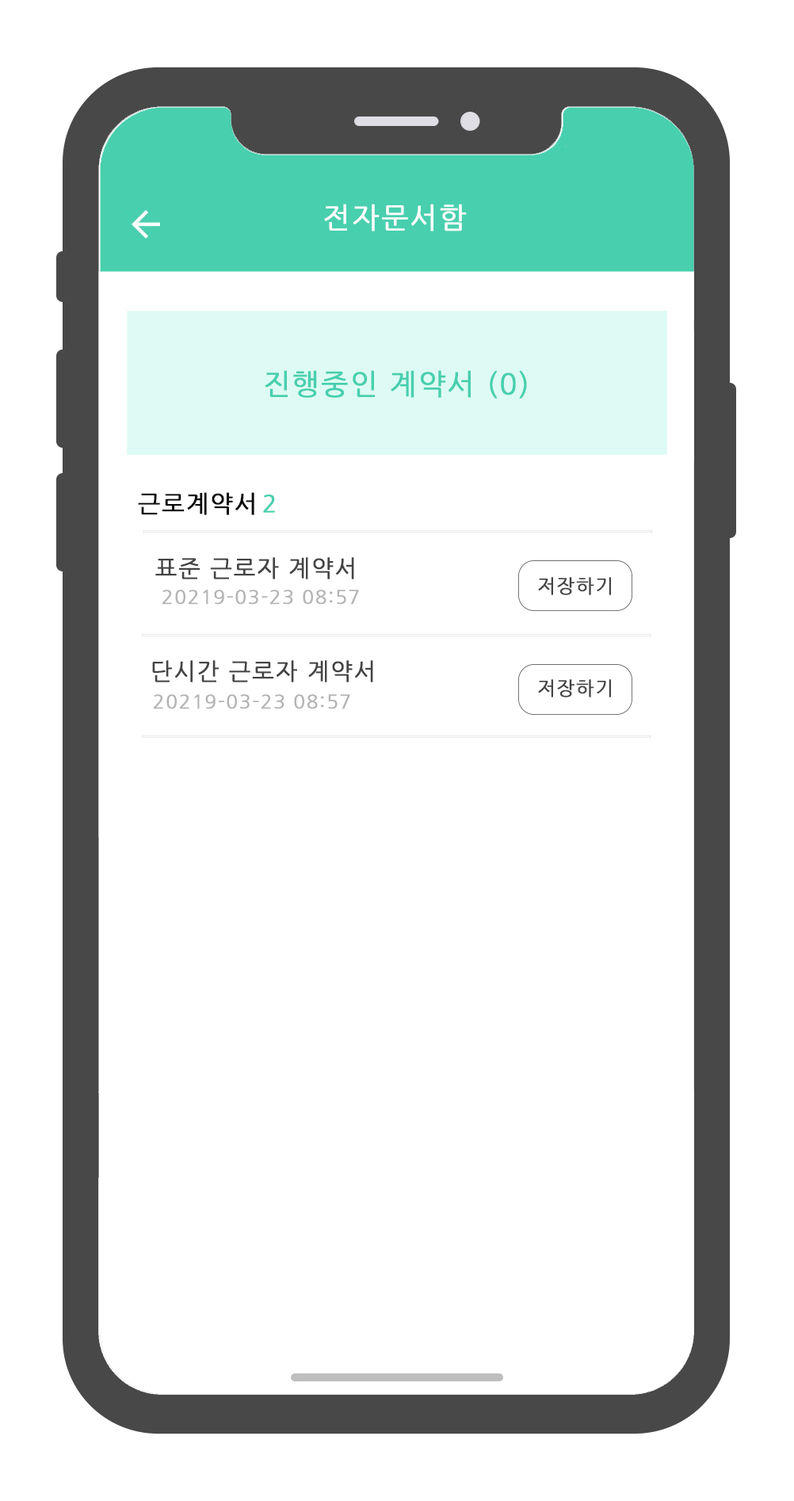
<style>
.page{position:relative;width:794px;height:1501px;background:#ffffff}
.page>*{position:absolute;margin:0}
.t1{font:28.5px "NanumGothic";letter-spacing:0.05em;color:#fefefe;font-weight:bold}
.t2{font:28.5px "NanumGothic";letter-spacing:0.05em;color:#48cfae;font-weight:bold}
.t3{font:23.8px "NanumGothic";letter-spacing:0.05em;color:#0b0b0b;font-weight:bold}
.t4{font:23.8px "NanumGothic";letter-spacing:0.05em;color:#48cfae;font-weight:bold}
.t5{font:23px "NanumGothic";letter-spacing:0.05em;color:#454444;font-weight:bold}
.t6{font:19px "NanumGothic";letter-spacing:0.05em;color:#454444;font-weight:bold}
.t7{font:19px "NanumGothic";letter-spacing:0.05em;color:#b4b4b4;font-weight:bold}
</style>
<div class="page">
<p class="t1" style="left:324px;top:204px;width:143px;height:27px">전자문서함</p>
<p class="t2" style="left:265px;top:370px;width:262px;height:29px">진행중인 계약서 (0)</p>
<p class="t3" style="left:138px;top:492px;width:116px;height:23px">근로계약서</p>
<p class="t4" style="left:263px;top:495px;width:12px;height:18px">2</p>
<p class="t5" style="left:155px;top:557px;width:199px;height:22px">표준 근로자 계약서</p>
<p class="t6" style="left:538px;top:577px;width:73px;height:18px">저장하기</p>
<p class="t7" style="left:162px;top:590px;width:197px;height:15px">20219-03-23 08:57</p>
<p class="t5" style="left:152px;top:660px;width:221px;height:22px">단시간 근로자 계약서</p>
<p class="t6" style="left:538px;top:679px;width:73px;height:19px">저장하기</p>
<p class="t7" style="left:154px;top:694px;width:196px;height:15px">20219-03-23 08:57</p>
</div>
